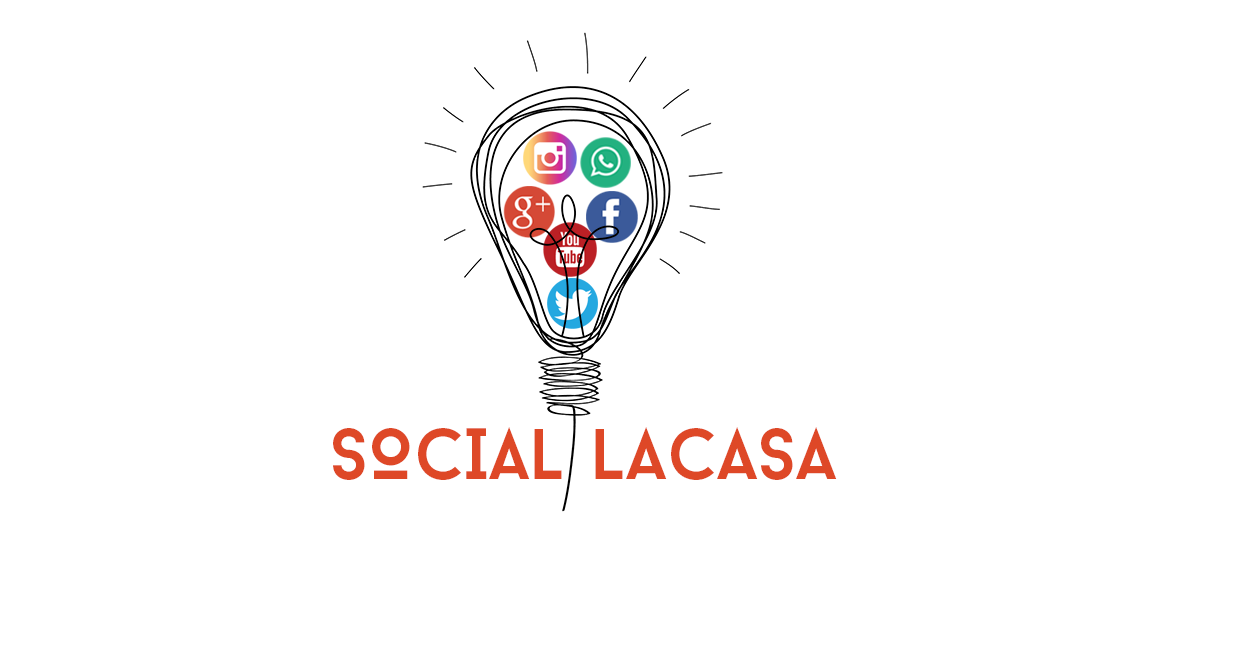
<style>
.page{position:relative;width:1243px;height:658px;background:#ffffff}
.page>*{position:absolute;margin:0}
.t1{font:72px "BaronNeue";color:#de4827;text-transform:uppercase}
</style>
<div class="page">
<p class="t1" style="left:333px;top:427px;width:504px;height:53px">social Lacasa</p>
</div>
